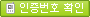
<style>
.page{position:relative;width:90px;height:17px}
.page>*{position:absolute;margin:0}
.t1{font:12px "morris9";letter-spacing:-0.03em;color:#ffffff}
</style>
<div class="page">
<p class="t1" style="left:20px;top:3px;width:63px;height:10px">인증번호 확인</p>
</div>
